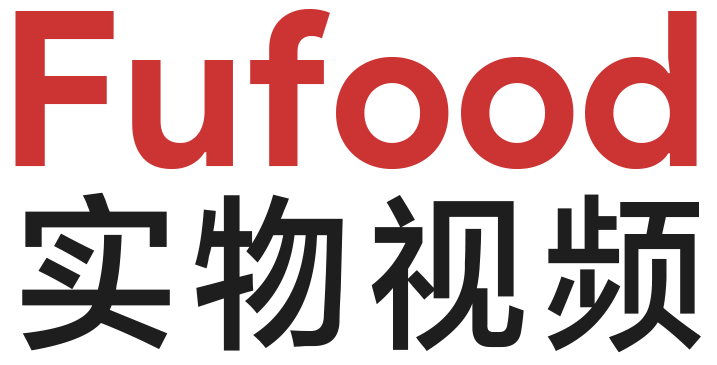
<style>
.page{position:relative;width:717px;height:365px;background:#ffffff}
.page>*{position:absolute;margin:0}
.t1{font:216.1px "ProductSans-Bold";color:#cc3333}
.t2{font:166.7px "FZLTZHK--GBK1-0";letter-spacing:0.1em;color:#1e1e1e;scale:0.96 1}
</style>
<div class="page">
<p class="t1" style="left:15px;top:9px;width:682px;height:160px">Fufood</p>
<p class="t2" style="left:22px;top:192px;width:679px;height:161px">实物视频</p>
</div>
